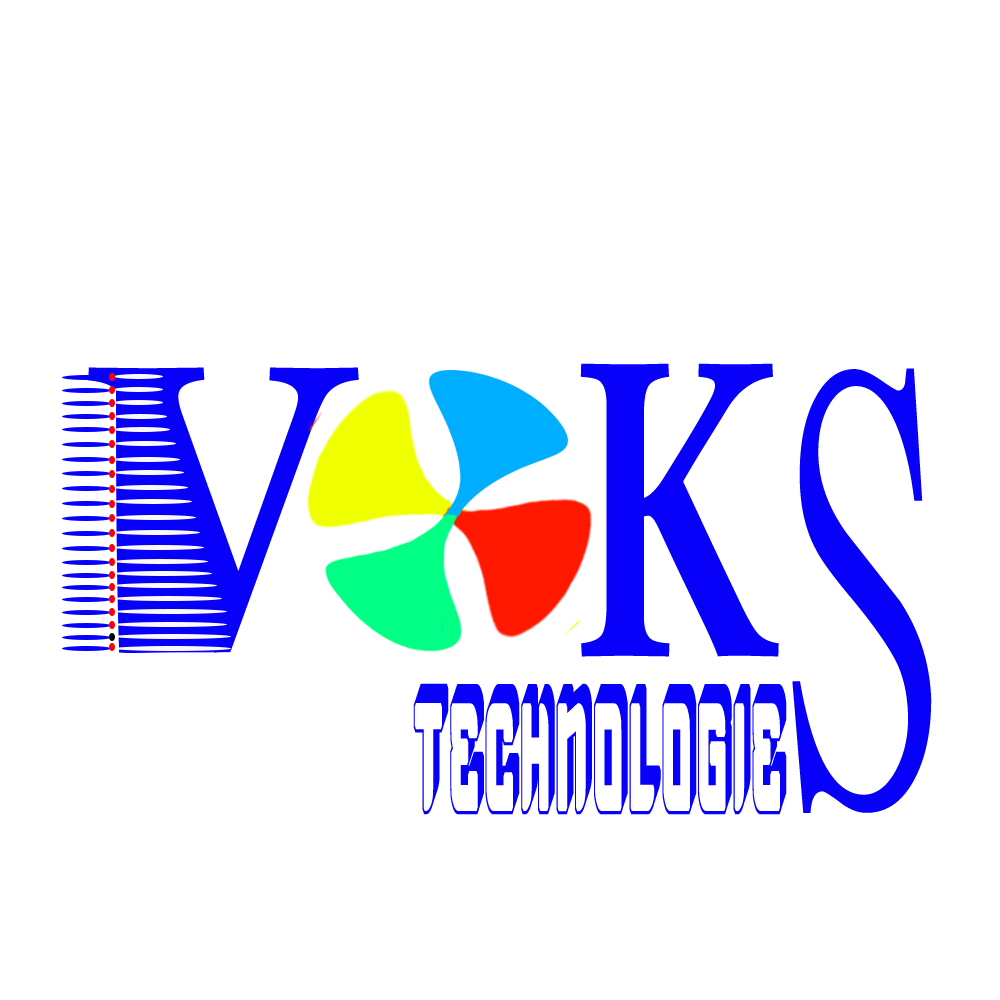
<style>
.page{position:relative;width:1000px;height:1000px;background:#ffffff}
.page>*{position:absolute;margin:0}
.t1{font:623.7px "MicrosoftUighur-Bold";color:#0701f9;scale:0.65 1}
.t2{font:597.9px "MicrosoftUighur-Bold";color:#0701f9;scale:0.9 1}
.t3{font:593.1px "PMingLiU-ExtB";color:#0701f9;scale:0.55 1}
.t4{font:170px "vtksmorningrain3D";color:#0701f9;scale:0.32 1}
</style>
<div class="page">
<p class="t1" style="left:580px;top:363px;width:199px;height:294px">K</p>
<p class="t2" style="left:88px;top:367px;width:271px;height:286px">V</p>
<p class="t3" style="left:792px;top:368px;width:140px;height:445px;rotate:-1deg">S</p>
<p class="t4" style="left:413px;top:683px;width:374px;height:132px">TECHNOLOGIE</p>
</div>
